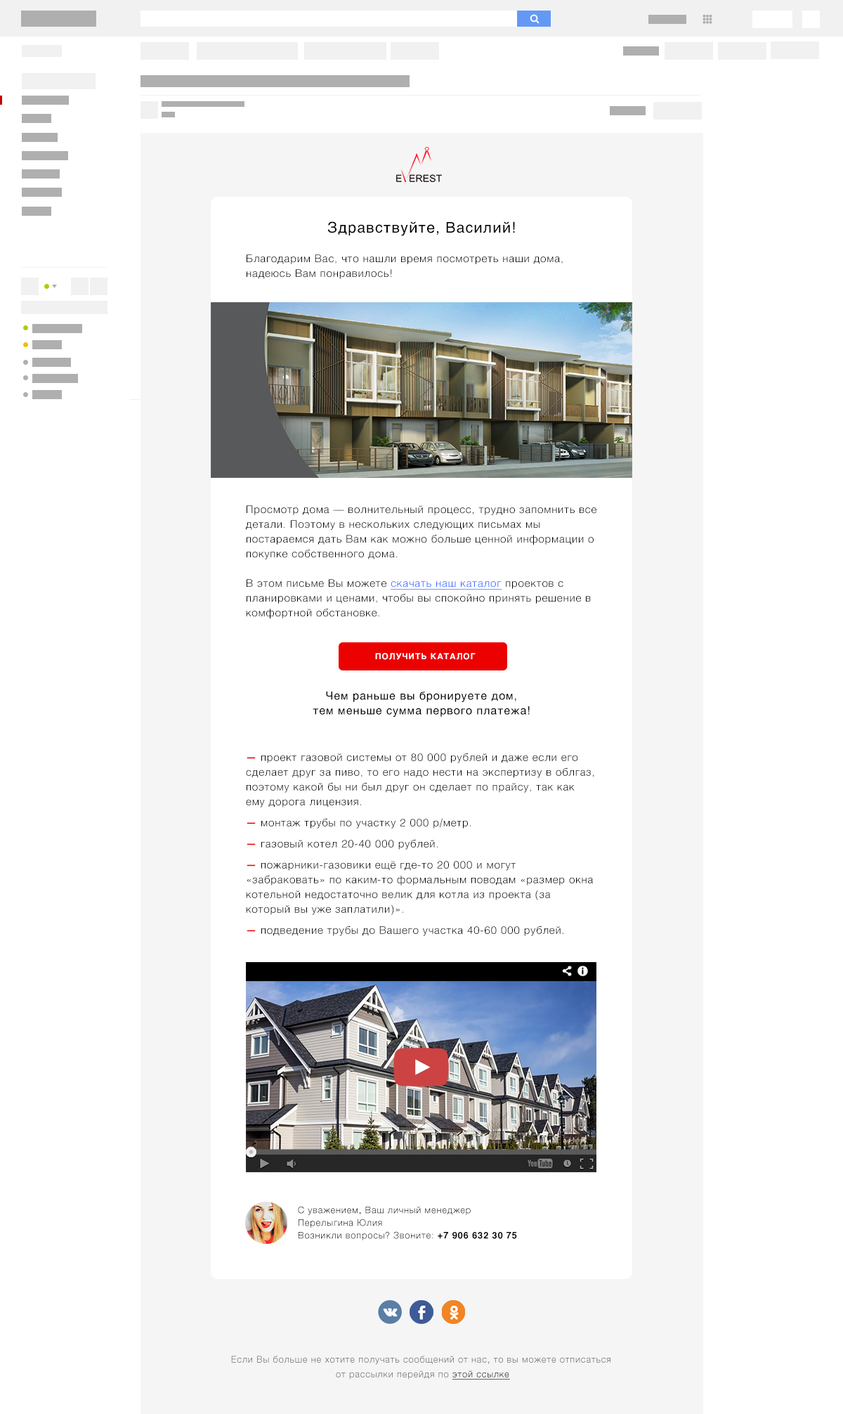
<style>
.page{position:relative;width:843px;height:1414px;background:#ffffff}
.page>*{position:absolute;margin:0}
.t1{font:8.4px "Helvetica-Bold";letter-spacing:0.08em;color:#ffffff}
.t2{font:11.2px/14.8px "Helvetica";letter-spacing:0.06em;color:#000000}
.t3{font:10.5px/14.8px "Helvetica-Light";letter-spacing:0.06em;color:#000000}
.t4{font:10.5px/14.8px "Helvetica-Bold";letter-spacing:0.06em;color:#ec0101}
.t5{font:10.5px/21.1px "Helvetica-Bold";letter-spacing:0.06em;color:#ec0101}
.t6{font:10.5px/21.1px "Helvetica-Light";letter-spacing:0.06em;color:#000000}
.t7{font:9.1px/12.6px "Helvetica-Light";letter-spacing:0.06em;color:#000000}
.t8{font:9.1px/12.6px "Helvetica-Bold";letter-spacing:0.06em;color:#000000}
.t9{font:9.1px/14.8px "Helvetica-Light";letter-spacing:0.06em;color:#666666}
.t10{font:9.1px/14.8px "Helvetica-Light";letter-spacing:0.06em;color:#000000;text-decoration:underline}
</style>
<div class="page">
<p class="t1" style="left:375px;top:653px;width:101px;height:7px">ПОЛУЧИТЬ КАТАЛОГ</p>
<p class="t2" style="left:313px;top:692px;width:217px;height:25px;text-align:center">Чем раньше вы бронируете дом, <br>тем меньше сумма первого платежа!</p>
<p class="t3" style="left:246px;top:753px;width:348px;height:183px"><span class="t4">— </span>проект газовой системы от 80 000 рублей и даже если его сделает друг за пиво, то его надо нести на экспертизу в облгаз, поэтому какой бы ни был друг он сделает по прайсу, так как ему дорога лицензия.<br><span class="t5">— </span><span class="t6">монтаж трубы по участку 2 000 р/метр.<br></span><span class="t5">— </span><span class="t6">газовый котел 20-40 000 рублей.<br></span><span class="t5">— </span><span class="t6">пожарники-газовики ещё где-то 20 000 и могут </span>«забраковать» по каким-то формальным поводам «размер окна котельной недостаточно велик для котла из проекта (за который вы уже заплатили)».<br><span class="t5">— </span><span class="t6">подведение трубы до Вашего участка 40-60 000 рублей.</span></p>
<p class="t7" style="left:298px;top:1206px;width:219px;height:34px">С уважением, Ваш личный менеджер<br>Перелыгина Юлия<br>Возникли вопросы? Звоните: <span class="t8">+7 906 632 30 75</span></p>
<p class="t9" style="left:231px;top:1356px;width:380px;height:24px;text-align:center">Если Вы больше не хотите получать сообщений от нас, то вы можете отписаться <br>от рассылки перейдя по <span class="t10">этой ссылке</span></p>
</div>
